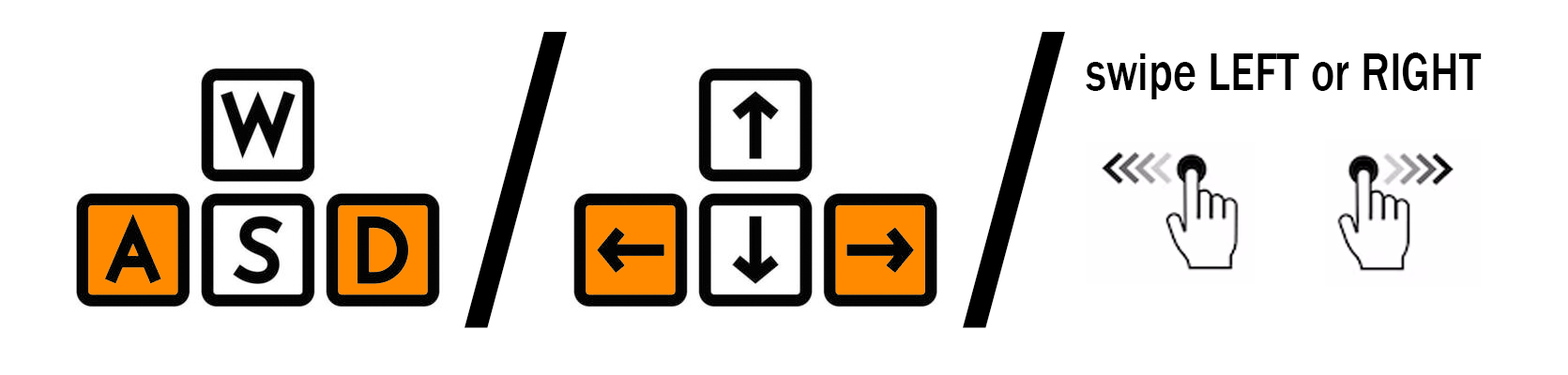
<style>
.page{position:relative;width:1568px;height:375px;background:#ffffff}
.page>*{position:absolute;margin:0}
.t1{font:300.5px "ConsolaMono-Bold";color:#000000;scale:0.58 1}
.t2{font:54px "FranklinGothic-Medium";color:#000000;scale:0.83 1}
</style>
<div class="page">
<p class="t1" style="left:464px;top:31px;width:103px;height:297px">/</p>
<p class="t1" style="left:963px;top:31px;width:102px;height:297px">/</p>
<p class="t2" style="left:1086px;top:53px;width:396px;height:46px">swipe LEFT or RIGHT</p>
</div>
